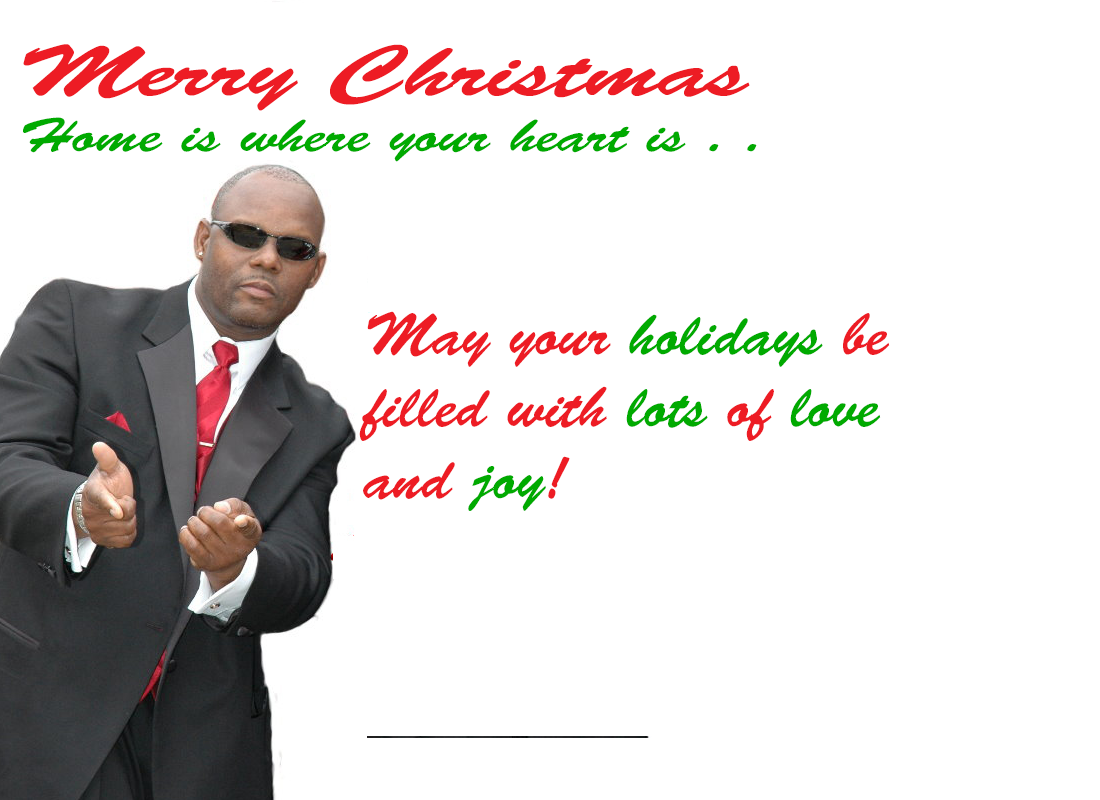
<style>
.page{position:relative;width:1100px;height:800px;background:#ffffff}
.page>*{position:absolute;margin:0}
.t1{font:72px "BrushScriptStd";color:#ed1c24;scale:1.46 1}
.t2{font:48.2px "BrushScriptStd";color:#00aa00;scale:1.25 1}
.t3{font:48.2px "BrushScriptStd";color:#ed1c24;scale:1.25 1}
.t4{font:60px "BrushScriptStd";color:#ed1c24}
.t5{font:60px "BrushScriptStd";color:#00aa00}
</style>
<div class="page">
<p class="t1" style="left:23px;top:44px;width:727px;height:67px">Merry Christmas</p>
<p class="t2" style="left:23px;top:117px;width:734px;height:45px">Home is where your heart is . . <span class="t3">.</span></p>
<p class="t4" style="left:359px;top:311px;width:531px;height:200px">May your <span class="t5">holidays</span> be filled with <span class="t5">lots</span> of <span class="t5">love</span> and <span class="t5">joy</span>!</p>
</div>
